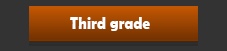
<style>
.page{position:relative;width:227px;height:51px;background:#333333}
.page>*{position:absolute;margin:0}
.t1{font:18.2px "BerlinSansFBDemi-Bold";color:#ffffff;scale:0.84 1}
</style>
<div class="page">
<p class="t1" style="left:70px;top:17px;width:80px;height:14px">Third grade</p>
</div>
